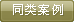
<style>
.page{position:relative;width:74px;height:22px}
.page>*{position:absolute;margin:0}
.t1{font:12px "SimSun";letter-spacing:0.1em;color:#ffffff}
</style>
<div class="page">
<p class="t1" style="left:13px;top:4px;width:50px;height:11px">同类案例</p>
</div>
